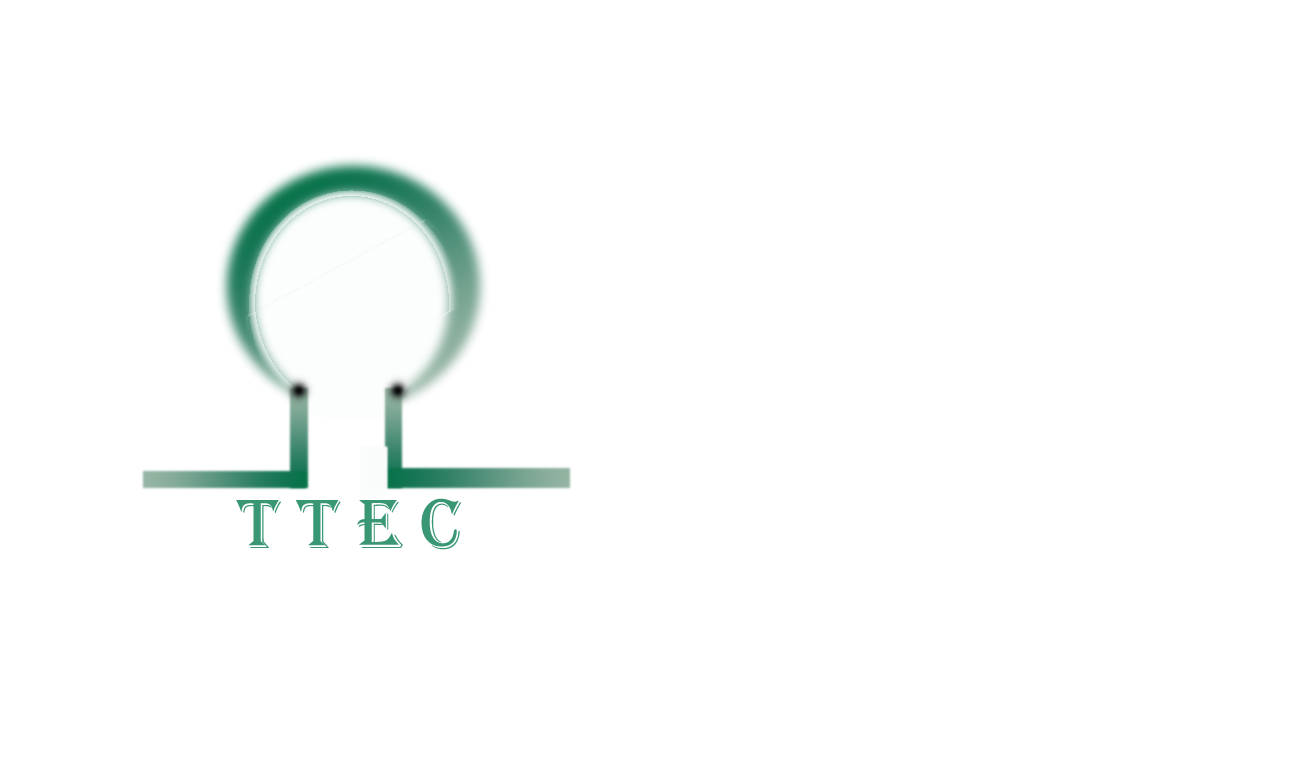
<style>
.page{position:relative;width:1300px;height:777px;background:#ffffff}
.page>*{position:absolute;margin:0}
.t1{font:72px "Algerian";color:#399773}
</style>
<div class="page">
<p class="t1" style="left:236px;top:498px;width:225px;height:52px">T T E C</p>
</div>
